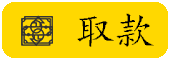
<style>
.page{position:relative;width:170px;height:60px;background:#ffd800}
.page>*{position:absolute;margin:0}
.t1{font:40px "¿¬Ìå";color:#000000}
</style>
<div class="page">
<p class="t1" style="left:77px;top:13px;width:77px;height:34px">取款</p>
</div>
